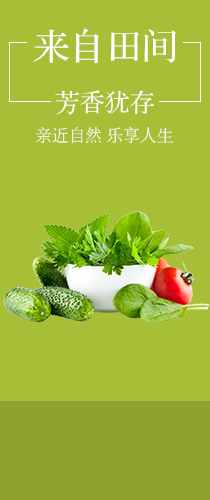
<style>
.page{position:relative;width:210px;height:500px;background:#a7bf37}
.page>*{position:absolute;margin:0}
.t1{font:36.5px "FZS3JW--GB1-0";color:#ffffff}
.t2{font:25px "FZS3JW--GB1-0";color:#ffffff}
.t3{font:16.7px "FZSYJW--GB1-0";color:#ffffff}
</style>
<div class="page">
<p class="t1" style="left:33px;top:28px;width:143px;height:36px">来自田间</p>
<p class="t2" style="left:55px;top:90px;width:99px;height:25px">芳香犹存</p>
<p class="t3" style="left:36px;top:126px;width:137px;height:18px">亲近自然 乐享人生</p>
</div>
